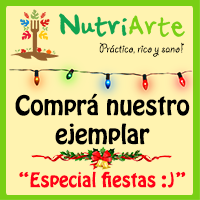
<style>
.page{position:relative;width:200px;height:200px;background:#fff3b0}
.page>*{position:absolute;margin:0}
.t1{font:14px "GiddyupStd";color:#000000}
.t2{font:24px "HoboStd";color:#000000}
.t3{font:18px "HoboStd";color:#ff0018}
</style>
<div class="page">
<p class="t1" style="left:99px;top:42px;width:85px;height:15px">Práctico, rico y sano!</p>
<p class="t2" style="left:15px;top:93px;width:175px;height:95px;text-align:center">Comprá nuestro ejemplar <br><br><span class="t3">“Especial fiestas :)”</span></p>
</div>
